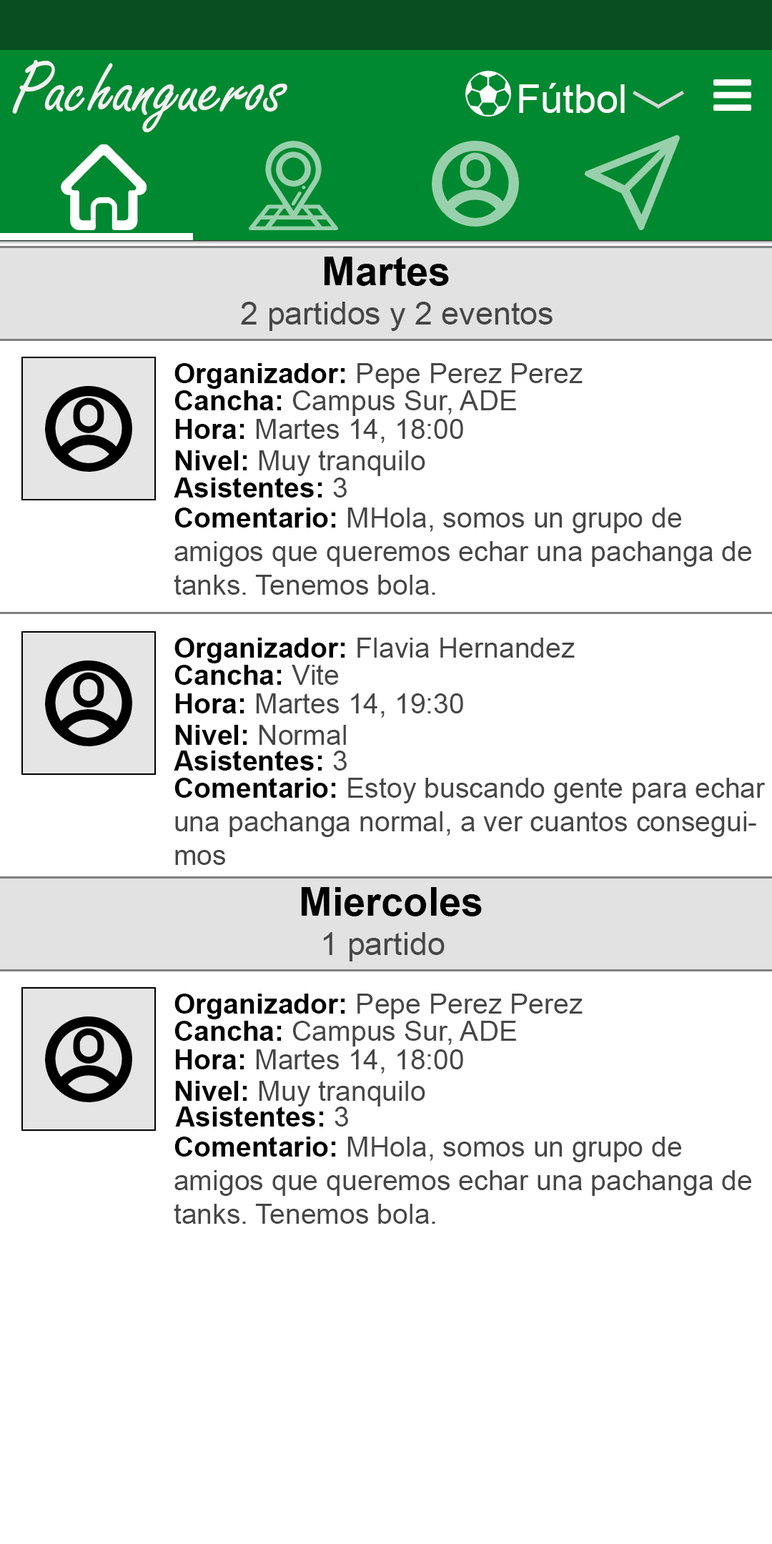
<style>
.page{position:relative;width:772px;height:1544px;background:#ffffff}
.page>*{position:absolute;margin:0}
.t1{font:80px "FreestyleScript-Regular";color:#f2f2f2}
.t2{font:40px "ArialMT";color:#ffffff}
.t3{font:40px "Arial-BoldMT";color:#000000}
.t4{font:32px "ArialMT";color:#464646}
.t5{font:28px "ArialMT";color:#464646}
.t6{font:28px "Arial-BoldMT";color:#000000}
</style>
<div class="page">
<p class="t1" style="left:12px;top:60px;width:275px;height:72px">Pachangueros</p>
<p class="t2" style="left:519px;top:83px;width:106px;height:30px">Fútbol</p>
<p class="t3" style="left:324px;top:257px;width:125px;height:29px">Martes</p>
<p class="t4" style="left:241px;top:302px;width:312px;height:29px">2 partidos y 2 eventos</p>
<p class="t5" style="left:174px;top:363px;width:409px;height:26px"><span class="t6">Organizador: </span>Pepe Perez Perez</p>
<p class="t5" style="left:174px;top:390px;width:342px;height:26px"><span class="t6">Cancha: </span>Campus Sur, ADE</p>
<p class="t5" style="left:176px;top:419px;width:287px;height:24px"><span class="t6">Hora: </span>Martes 14, 18:00</p>
<p class="t5" style="left:175px;top:450px;width:250px;height:26px"><span class="t6">Nivel: </span>Muy tranquilo</p>
<p class="t6" style="left:174px;top:478px;width:173px;height:20px">Asistentes: <span class="t5">3</span></p>
<p class="t5" style="left:174px;top:508px;width:577px;height:87px"><span class="t6">Comentario: </span>MHola, somos un grupo de <br>amigos que queremos echar una pachanga de<br>tanks. Tenemos bola.</p>
<p class="t5" style="left:174px;top:638px;width:401px;height:25px"><span class="t6">Organizador: </span>Flavia Hernandez</p>
<p class="t6" style="left:174px;top:665px;width:164px;height:20px">Cancha: <span class="t5">Vite</span></p>
<p class="t5" style="left:176px;top:694px;width:287px;height:24px"><span class="t6">Hora: </span>Martes 14, 19:30</p>
<p class="t6" style="left:175px;top:725px;width:171px;height:20px">Nivel: <span class="t5">Normal</span></p>
<p class="t6" style="left:174px;top:751px;width:173px;height:20px">Asistentes: <span class="t5">3</span></p>
<p class="t5" style="left:174px;top:778px;width:592px;height:87px"><span class="t6">Comentario: </span>Estoy buscando gente para echar<br>una pachanga normal, a ver cuantos consegui-<br>mos</p>
<p class="t3" style="left:301px;top:887px;width:181px;height:30px">Miercoles</p>
<p class="t4" style="left:323px;top:932px;width:122px;height:30px">1 partido</p>
<p class="t5" style="left:174px;top:994px;width:409px;height:26px"><span class="t6">Organizador: </span>Pepe Perez Perez</p>
<p class="t5" style="left:174px;top:1021px;width:342px;height:26px"><span class="t6">Cancha: </span>Campus Sur, ADE</p>
<p class="t5" style="left:176px;top:1050px;width:287px;height:24px"><span class="t6">Hora: </span>Martes 14, 18:00</p>
<p class="t5" style="left:175px;top:1081px;width:250px;height:26px"><span class="t6">Nivel: </span>Muy tranquilo</p>
<p class="t6" style="left:175px;top:1107px;width:173px;height:20px">Asistentes: <span class="t5">3</span></p>
<p class="t5" style="left:174px;top:1137px;width:577px;height:87px"><span class="t6">Comentario: </span>MHola, somos un grupo de <br>amigos que queremos echar una pachanga de<br>tanks. Tenemos bola.</p>
</div>
